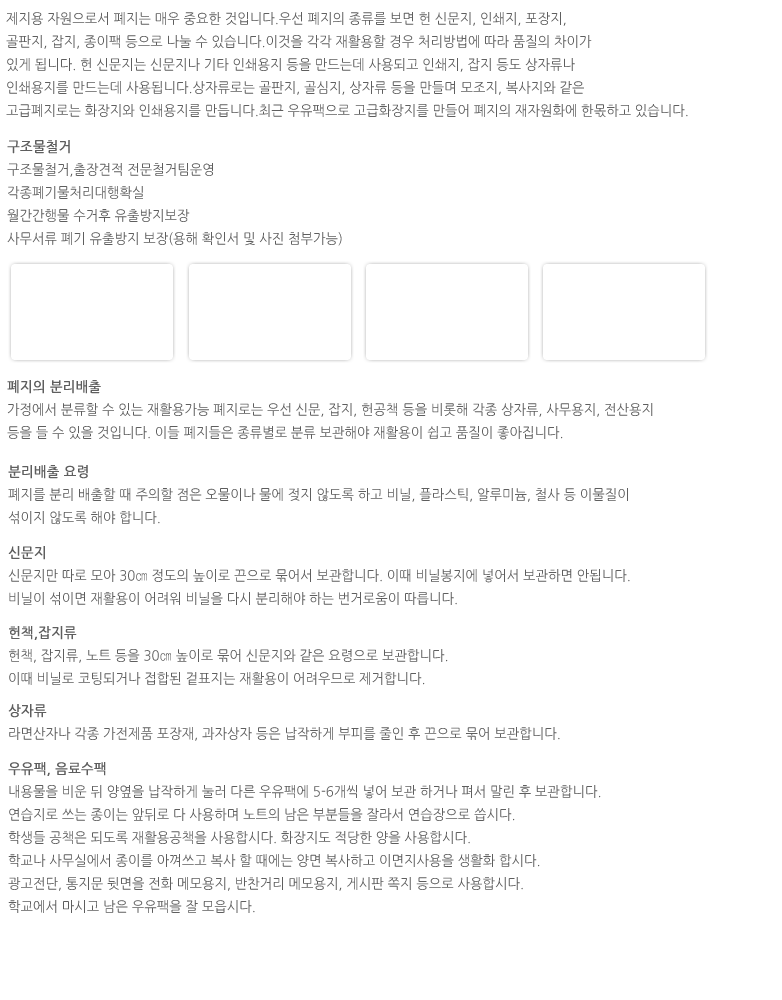
<style>
.page{position:relative;width:782px;height:1000px;background:#ffffff}
.page>*{position:absolute;margin:0}
.t1{font:14px/23px "NanumGothic";color:#5e5e5e;scale:0.95 1}
.t2{font:19px/23px "NanumGothic";color:#5e5e5e;scale:0.95 1}
.t3{font:14px/23px "NanumGothic";color:#5e5e5e;font-weight:bold;scale:0.95 1}
</style>
<div class="page">
<p class="t1" style="left:6px;top:12px;width:682px;height:106px"><span class="t2"><br><br></span>제지용 자원으로서 폐지는 매우 중요한 것입니다.우선 폐지의 종류를 보면 헌 신문지, 인쇄지, 포장지, <br>골판지, 잡지, 종이팩 등으로 나눌 수 있습니다.이것을 각각 재활용할 경우 처리방법에 따라 품질의 차이가<br>있게 됩니다. 헌 신문지는 신문지나 기타 인쇄용지 등을 만드는데 사용되고 인쇄지, 잡지 등도 상자류나 <br>인쇄용지를 만드는데 사용됩니다.상자류로는 골판지, 골심지, 상자류 등을 만들며 모조지, 복사지와 같은 <br>고급폐지로는 화장지와 인쇄용지를 만듭니다.최근 우유팩으로 고급화장지를 만들어 폐지의 재자원화에 한몫하고 있습니다.</p>
<p class="t1" style="left:7px;top:140px;width:335px;height:106px"><span class="t3">구조물철거<br></span>구조물철거,출장견적 전문철거팀운영 <br>각종폐기물처리대행확실 <br>월간간행물 수거후 유출방지보장<br>사무서류 폐기 유출방지 보장(용해 확인서 및 사진 첨부가능)</p>
<p class="t1" style="left:7px;top:380px;width:646px;height:60px"><span class="t3">폐지의 분리배출<br></span>가정에서 분류할 수 있는 재활용가능 폐지로는 우선 신문, 잡지, 헌공책 등을 비롯해 각종 상자류, 사무용지, 전산용지 <br>등을 들 수 있을 것입니다. 이들 폐지들은 종류별로 분류 보관해야 재활용이 쉽고 품질이 좋아집니다.</p>
<p class="t1" style="left:8px;top:465px;width:620px;height:60px"><span class="t3">분리배출 요령<br></span>폐지를 분리 배출할 때 주의할 점은 오물이나 물에 젖지 않도록 하고 비닐, 플라스틱, 알루미늄, 철사 등 이물질이 <br>섞이지 않도록 해야 합니다.</p>
<p class="t1" style="left:8px;top:546px;width:622px;height:59px"><span class="t3">신문지<br></span>신문지만 따로 모아 30㎝ 정도의 높이로 끈으로 묶어서 보관합니다. 이때 비닐봉지에 넣어서 보관하면 안됩니다.<br>비닐이 섞이면 재활용이 어려워 비닐을 다시 분리해야 하는 번거로움이 따릅니다.</p>
<p class="t1" style="left:9px;top:626px;width:439px;height:59px"><span class="t3">헌책,잡지류</span> <br>헌책, 잡지류, 노트 등을 30㎝ 높이로 묶어 신문지와 같은 요령으로 보관합니다.<br>이때 비닐로 코팅되거나 접합된 겉표지는 재활용이 어려우므로 제거합니다.</p>
<p class="t1" style="left:8px;top:704px;width:552px;height:37px"><span class="t3">상자류<br></span>라면산자나 각종 가전제품 포장재, 과자상자 등은 납작하게 부피를 줄인 후 끈으로 묶어 보관합니다.</p>
<p class="t1" style="left:8px;top:762px;width:593px;height:151px"><span class="t3">우유팩, 음료수팩 <br></span>내용물을 비운 뒤 양옆을 납작하게 눌러 다른 우유팩에 5-6개씩 넣어 보관 하거나 펴서 말린 후 보관합니다.<br>연습지로 쓰는 종이는 앞뒤로 다 사용하며 노트의 남은 부분들을 잘라서 연습장으로 씁시다.<br>학생들 공책은 되도록 재활용공책을 사용합시다. 화장지도 적당한 양을 사용합시다.<br>학교나 사무실에서 종이를 아껴쓰고 복사 할 때에는 양면 복사하고 이면지사용을 생활화 합시다.<br>광고전단, 통지문 뒷면을 전화 메모용지, 반찬거리 메모용지, 게시판 쪽지 등으로 사용합시다.<br>학교에서 마시고 남은 우유팩을 잘 모읍시다.</p>
</div>
